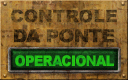
<style>
.page{position:relative;width:128px;height:80px}
.page>*{position:absolute;margin:0}
.t1{font:17.2px "Arial-Black";letter-spacing:-0.005em;color:#543d1d;font-weight:bold}
.t2{font:17.7px "Arial-Black";letter-spacing:-0.045em;font-weight:bold;scale:1.04 1}
.t3{font:14.5px "Arial-Black";letter-spacing:-0.045em;color:#21ba16;scale:0.9 1}
</style>
<div class="page">
<p class="t1" style="left:10px;top:9px;width:107px;height:14px">CONTROLE</p>
<p class="t2" style="left:14px;top:29px;width:101px;height:14px">DA PONTE</p>
<p class="t3" style="left:15px;top:55px;width:99px;height:12px">OPERACIONAL</p>
</div>
